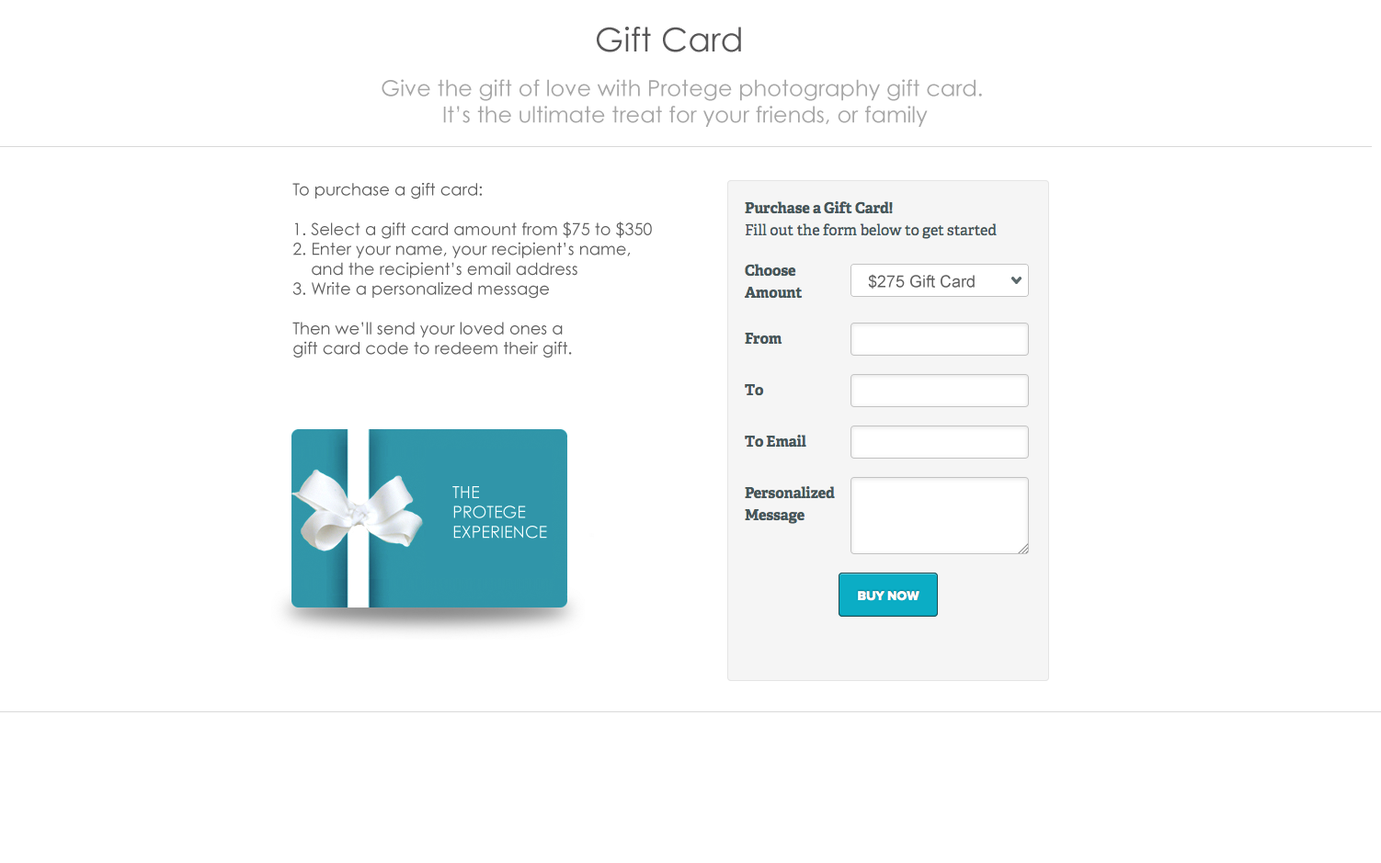
<style>
.page{position:relative;width:1381px;height:863px;background:#ffffff}
.page>*{position:absolute;margin:0}
.t1{font:33.1px "CenturyGothic";color:#585758}
.t2{font:22.1px "CenturyGothic";color:#a6a6a6}
.t3{font:16.6px "CenturyGothic";color:#5f5f5f}
.t4{font:16.6px "ArialMT";color:#5f5f5f}
</style>
<div class="page">
<p class="t1" style="left:597px;top:27px;width:144px;height:25px">Gift Card</p>
<p class="t2" style="left:382px;top:79px;width:600px;height:48px">Give the gift of love with Protege photography gift card.<br>          It’s the ultimate treat for your friends, or family</p>
<p class="t3" style="left:292px;top:183px;width:360px;height:175px">To purchase a gift card:<br><br>1. Select a gift card amount from $75 to $350<br>2. Enter your name, your recipient’s name, <br>    and the recipient’s email address<br>3. Write a personalized message<br><br>Then we’ll send your loved ones a <br>gift card code to redeem their gift.</p>
<p class="t4" style="left:868px;top:274px;width:107px;height:16px">$275 Gift Card</p>
</div>
